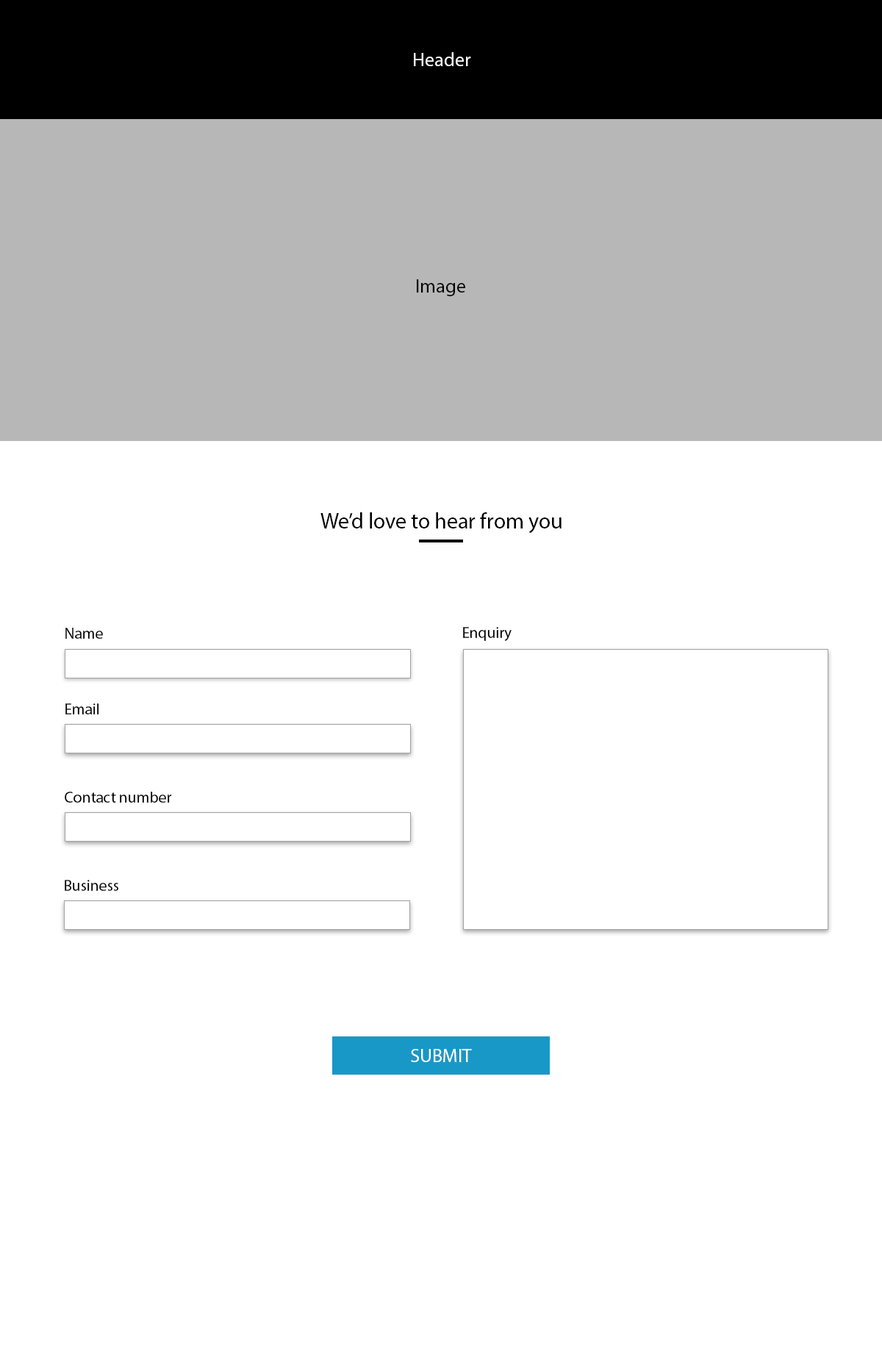
<style>
.page{position:relative;width:882px;height:1351px;background:#ffffff}
.page>*{position:absolute;margin:0}
.t1{font:19.1px "MyriadPro-Regular";color:#ffffff}
.t2{font:19.1px "MyriadPro-Regular";color:#000000}
.t3{font:22.1px "MyriadPro-Regular";color:#000000}
.t4{font:15.4px "MyriadPro-Regular";color:#000000}
</style>
<div class="page">
<p class="t1" style="left:414px;top:52px;width:57px;height:14px">Header</p>
<p class="t2" style="left:417px;top:279px;width:48px;height:17px">Image</p>
<p class="t3" style="left:321px;top:512px;width:241px;height:22px">We’d love to hear from you</p>
<p class="t4" style="left:65px;top:628px;width:38px;height:11px">Name</p>
<p class="t4" style="left:463px;top:627px;width:49px;height:14px">Enquiry</p>
<p class="t4" style="left:65px;top:704px;width:34px;height:11px">Email</p>
<p class="t4" style="left:65px;top:792px;width:107px;height:11px">Contact number</p>
<p class="t4" style="left:65px;top:880px;width:53px;height:11px">Business</p>
<p class="t1" style="left:411px;top:1049px;width:61px;height:13px">SUBMIT</p>
</div>
